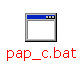
<style>
.page{position:relative;width:80px;height:80px;background:#ffffff}
.page>*{position:absolute;margin:0}
.t1{font:14px "MSReferenceSansSerif";color:#ff0000}
</style>
<div class="page">
<p class="t1" style="left:7px;top:47px;width:69px;height:14px">pap_c.bat</p>
</div>
